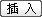
<style>
.page{position:relative;width:42px;height:17px;background:#ffffff}
.page>*{position:absolute;margin:0}
.t1{font:12px "NSimSun";color:#000000}
</style>
<div class="page">
<p class="t1" style="left:7px;top:3px;width:29px;height:11px">插 入</p>
</div>
